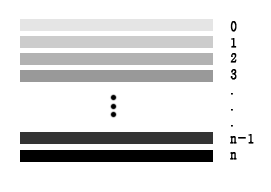
<style>
.page{position:relative;width:271px;height:192px;background:#ffffff}
.page>*{position:absolute;margin:0}
.t1{font:12px/16px "Haansoft-Batang";color:#000000;font-weight:bold}
</style>
<div class="page">
<p class="t1" style="left:230px;top:21px;width:24px;height:139px">0<br>1<br>2<br>3<br>.<br>.<br>.<br>n-1<br>n</p>
</div>
